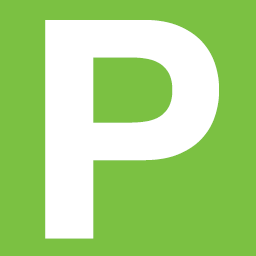
<style>
.page{position:relative;width:256px;height:256px;background:#7bc142}
.page>*{position:absolute;margin:0}
.t1{font:305.7px "HelveticaNeue-Bold";color:#ffffff}
</style>
<div class="page">
<p class="t1" style="left:45px;top:20px;width:174px;height:219px">P</p>
</div>
